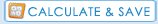
<style>
.page{position:relative;width:158px;height:24px;background:#ffffff}
.page>*{position:absolute;margin:0}
.t1{font:12px "CenturyGothic";letter-spacing:0.05em;color:#2588c8}
</style>
<div class="page">
<p class="t1" style="left:28px;top:7px;width:122px;height:10px">CALCULATE &amp; SAVE</p>
</div>
